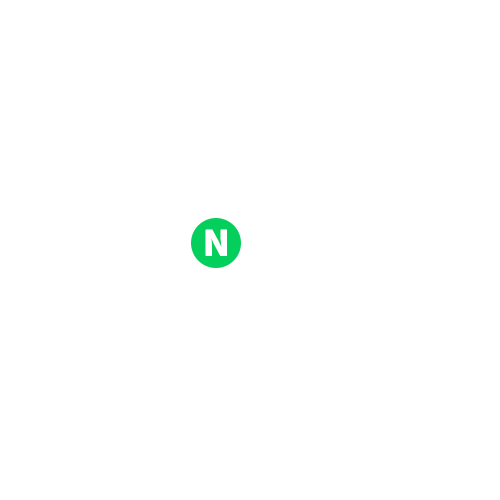
<style>
.page{position:relative;width:500px;height:500px;background:#ffffff}
.page>*{position:absolute;margin:0}
.t1{font:35px "NotoSansKR-Black";color:#ffffff}
</style>
<div class="page">
<p class="t1" style="left:205px;top:229px;width:22px;height:27px">N</p>
</div>
